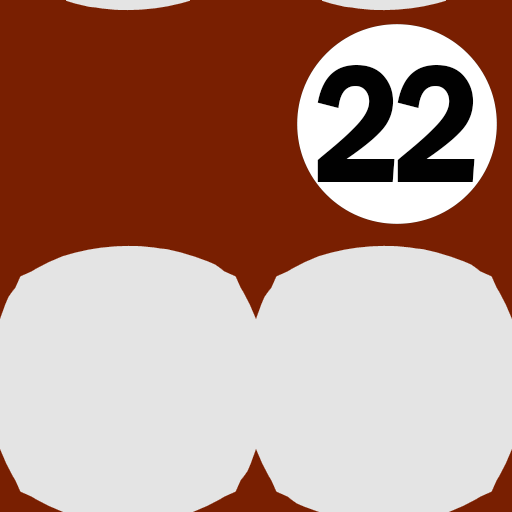
<style>
.page{position:relative;width:512px;height:512px;background:#e4e4e4}
.page>*{position:absolute;margin:0}
.t1{font:172.5px "FranklinGothic-Demi";letter-spacing:-0.05em;color:#010101;scale:0.87 1}
</style>
<div class="page">
<p class="t1" style="left:317px;top:65px;width:158px;height:117px">22</p>
</div>
